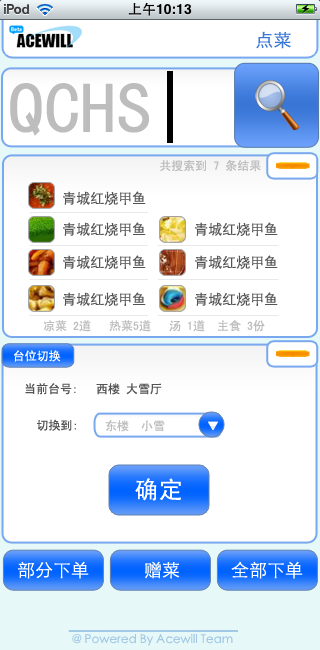
<style>
.page{position:relative;width:320px;height:650px;background:#ffffff}
.page>*{position:absolute;margin:0}
.t1{font:18px "STXihei";color:#3b77d7}
.t2{font:72px "SimHei";color:#bdbdbd}
.t3{font:72px "SimHei";color:#000000}
.t4{font:12px "SimHei";color:#bdbdbd}
.t5{font:14px "STXihei";color:#545454}
.t6{font:12px "SimHei";color:#ffffff}
.t7{font:12px "SimHei";color:#545454}
.t8{font:24px "SimHei";color:#ffffff}
.t9{font:18px "STXihei";color:#ffffff}
.t10{font:12px "STXihei";color:#a2c8e5}
</style>
<div class="page">
<p class="t1" style="left:256px;top:31px;width:35px;height:18px">点菜</p>
<p class="t2" style="left:10px;top:71px;width:163px;height:72px">QCHS<span class="t3">|</span></p>
<p class="t4" style="left:160px;top:159px;width:101px;height:13px">共搜索到 7 条结果</p>
<p class="t5" style="left:63px;top:191px;width:83px;height:14px">青城红烧甲鱼</p>
<p class="t5" style="left:63px;top:222px;width:83px;height:14px">青城红烧甲鱼</p>
<p class="t5" style="left:195px;top:222px;width:83px;height:14px">青城红烧甲鱼</p>
<p class="t5" style="left:63px;top:255px;width:83px;height:14px">青城红烧甲鱼</p>
<p class="t5" style="left:195px;top:255px;width:83px;height:14px">青城红烧甲鱼</p>
<p class="t5" style="left:63px;top:292px;width:83px;height:14px">青城红烧甲鱼</p>
<p class="t5" style="left:195px;top:292px;width:83px;height:14px">青城红烧甲鱼</p>
<p class="t4" style="left:44px;top:320px;width:221px;height:12px">凉菜 2道   热菜5道   汤 1道  主食 3份</p>
<p class="t6" style="left:14px;top:350px;width:47px;height:12px">台位切换</p>
<p class="t7" style="left:25px;top:383px;width:137px;height:12px">当前台号:   西楼 大雪厅</p>
<p class="t7" style="left:37px;top:419px;width:39px;height:12px">切换到:</p>
<p class="t4" style="left:105px;top:420px;width:60px;height:12px">东楼  小雪</p>
<p class="t8" style="left:135px;top:478px;width:46px;height:23px">确定</p>
<p class="t9" style="left:18px;top:561px;width:71px;height:18px">部分下单</p>
<p class="t9" style="left:145px;top:561px;width:35px;height:18px">赠菜</p>
<p class="t9" style="left:231px;top:561px;width:72px;height:18px">全部下单</p>
<p class="t10" style="left:72px;top:634px;width:161px;height:12px">@ Powered By Acewill Team</p>
</div>
